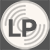
<style>
.page{position:relative;width:50px;height:50px;background:#545454}
.page>*{position:absolute;margin:0}
.t1{font:25px "Prompt-SemiBold";color:#545454}
</style>
<div class="page">
<p class="t1" style="left:8px;top:19px;width:29px;height:18px">LP</p>
</div>
